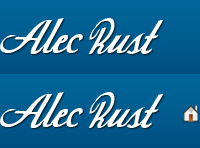
<style>
.page{position:relative;width:200px;height:148px}
.page>*{position:absolute;margin:0}
.t1{font:72px "Today";letter-spacing:-0.01em;color:#ffffff}
</style>
<div class="page">
<p class="t1" style="left:0px;top:18px;width:164px;height:36px">Alec Rust</p>
<p class="t1" style="left:0px;top:92px;width:164px;height:36px">Alec Rust</p>
</div>
